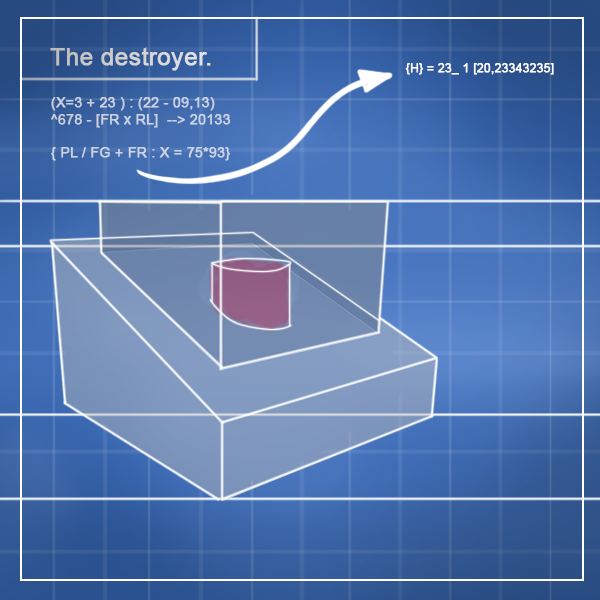
<style>
.page{position:relative;width:600px;height:600px}
.page>*{position:absolute;margin:0}
.t1{font:24px "ArialMT";color:#d1d2d2;font-weight:bold}
.t2{font:12px "ArialMT";color:#ffffff;font-weight:bold}
.t3{font:14px "ArialMT";color:#cad3e4;font-weight:bold}
</style>
<div class="page">
<p class="t1" style="left:50px;top:47px;width:161px;height:24px">The destroyer.</p>
<p class="t2" style="left:405px;top:63px;width:149px;height:12px">{H} = 23_ 1 [20,23343235]</p>
<p class="t3" style="left:51px;top:97px;width:180px;height:64px">(X=3 + 23 ) : (22 - 09,13) <br>^678 - [FR x RL]  --&gt; 20133<br><br>{ PL / FG + FR : X = 75*93}</p>
</div>
